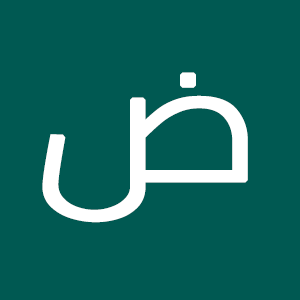
<style>
.page{position:relative;width:300px;height:300px;background:#005952}
.page>*{position:absolute;margin:0}
.t1{font:160px "Cairo-Light";letter-spacing:0.02em;color:#ffffff;font-weight:bold;scale:1.25 1}
</style>
<div class="page">
<p class="t1" style="left:42px;top:72px;width:206px;height:151px">ض</p>
</div>
